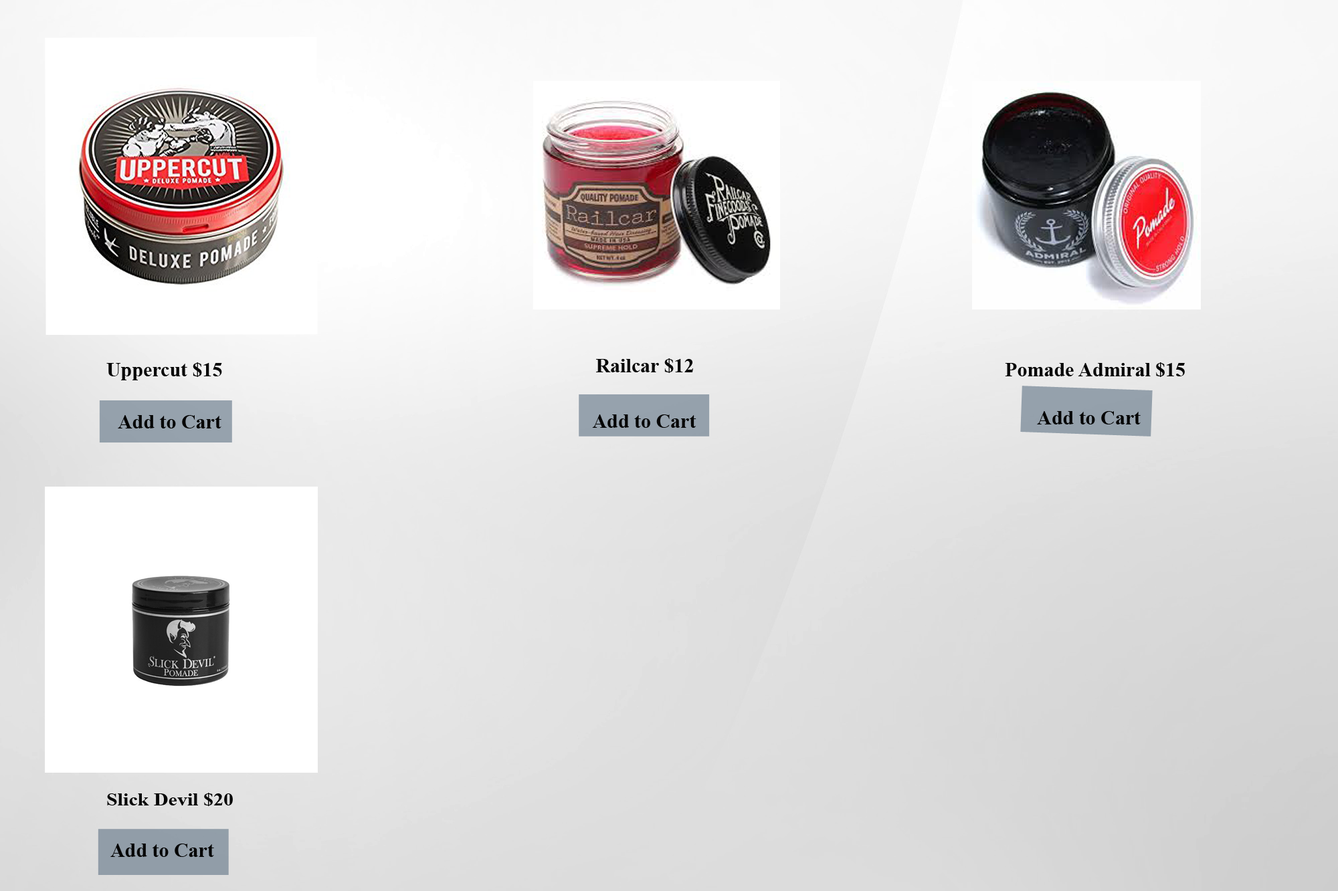
<style>
.page{position:relative;width:1338px;height:891px}
.page>*{position:absolute;margin:0}
.t1{font:20.1px "TimesNewRomanPS-BoldMT";color:#090909}
.t2{font:20.1px "TimesNewRomanPS-BoldMT";color:#040404}
.t3{font:20.1px "TimesNewRomanPS-BoldMT";color:#050505}
.t4{font:18.3px "TimesNewRomanPS-BoldMT";color:#050505;scale:1.1 1}
</style>
<div class="page">
<p class="t1" style="left:106px;top:362px;width:116px;height:19px">Uppercut $15</p>
<p class="t1" style="left:596px;top:358px;width:97px;height:15px">Railcar $12</p>
<p class="t2" style="left:1005px;top:362px;width:179px;height:15px">Pomade Admiral $15</p>
<p class="t3" style="left:1037px;top:411px;width:103px;height:14px">Add to Cart</p>
<p class="t3" style="left:118px;top:415px;width:103px;height:14px">Add to Cart</p>
<p class="t3" style="left:592px;top:415px;width:104px;height:13px">Add to Cart</p>
<p class="t4" style="left:107px;top:793px;width:126px;height:14px">Slick Devil $20</p>
<p class="t3" style="left:110px;top:844px;width:104px;height:13px">Add to Cart</p>
</div>
